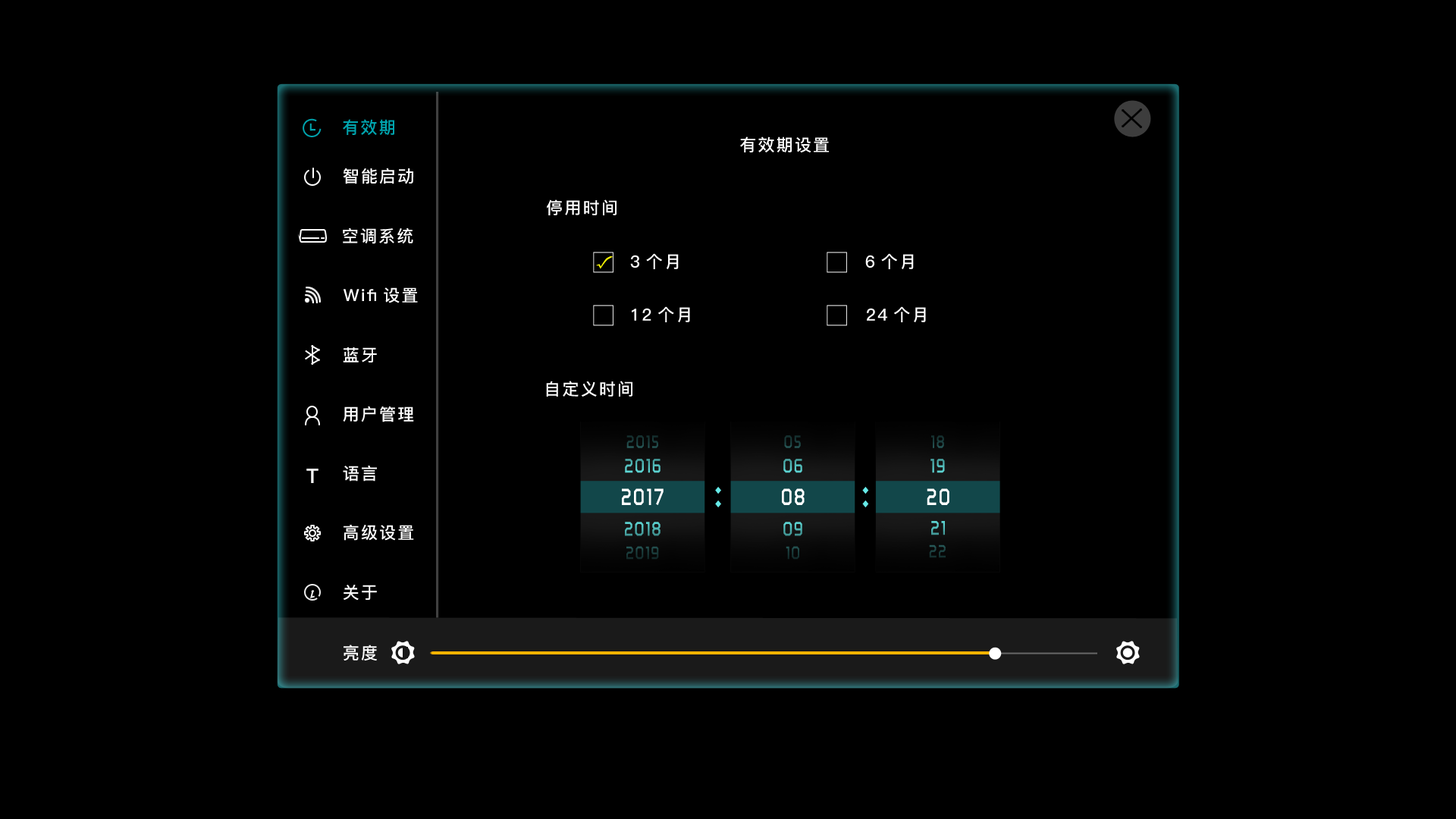
<style>
.page{position:relative;width:1456px;height:819px;background:#000000}
.page>*{position:absolute;margin:0}
.t1{font:16.7px "PingFang-SC-Bold";letter-spacing:0.1em;color:#00a5af}
.t2{font:16.7px "PingFang-SC-Bold";letter-spacing:0.1em;color:#ffffff}
.t3{font:18.4px "RTWSShangGoG0v1-Bold";letter-spacing:0.075em;color:#1a3d3c;scale:0.83 1}
.t4{font:18.4px "RTWSShangGoG0v1-Bold";letter-spacing:0.075em;color:#1b3d3d;scale:0.83 1}
.t5{font:20.3px "RTWSShangGoG0v1-Bold";letter-spacing:0.075em;scale:0.83 1}
.t6{font:19.8px "PingFang-SC-Heavy";letter-spacing:0.1em;color:#ffffff}
.t7{font:24px "RTWSShangGoG0v1-Bold";letter-spacing:0.075em;color:#ffffff;scale:0.83 1}
.t8{font:45.1px "RTWSShangGoG0v1-Bold";letter-spacing:0.075em;color:#66eae8;scale:0.83 1}
.t9{font:18.4px "RTWSShangGoG0v1-Bold";letter-spacing:0.075em;color:#1a3b3a;scale:0.83 1}
.t10{font:18.4px "RTWSShangGoG0v1-Bold";letter-spacing:0.075em;color:#1b3e3e;scale:0.83 1}
</style>
<div class="page">
<p class="t1" style="left:343px;top:119px;width:51px;height:16px">有效期</p>
<p class="t2" style="left:740px;top:136px;width:89px;height:16px">有效期设置</p>
<p class="t2" style="left:343px;top:168px;width:70px;height:16px">智能启动</p>
<p class="t2" style="left:547px;top:199px;width:70px;height:16px">停用时间</p>
<p class="t2" style="left:343px;top:227px;width:70px;height:17px">空调系统</p>
<p class="t2" style="left:630px;top:253px;width:49px;height:16px">3个月</p>
<p class="t2" style="left:865px;top:253px;width:49px;height:16px">6个月</p>
<p class="t2" style="left:344px;top:287px;width:74px;height:16px">Wifi设置</p>
<p class="t2" style="left:632px;top:306px;width:58px;height:16px">12个月</p>
<p class="t2" style="left:867px;top:306px;width:59px;height:16px">24个月</p>
<p class="t2" style="left:343px;top:347px;width:34px;height:15px">蓝牙</p>
<p class="t2" style="left:546px;top:381px;width:86px;height:16px">自定义时间</p>
<p class="t2" style="left:343px;top:406px;width:71px;height:16px">用户管理</p>
<p class="t3" style="left:626px;top:435px;width:32px;height:13px">2015</p>
<p class="t4" style="left:784px;top:435px;width:17px;height:13px">05</p>
<p class="t4" style="left:931px;top:435px;width:13px;height:13px">18</p>
<p class="t5" style="left:625px;top:459px;width:35px;height:14px">2016</p>
<p class="t5" style="left:783px;top:459px;width:19px;height:14px">06</p>
<p class="t5" style="left:930px;top:459px;width:15px;height:14px">19</p>
<p class="t6" style="left:306px;top:469px;width:12px;height:14px">T</p>
<p class="t2" style="left:343px;top:465px;width:34px;height:17px">语言</p>
<p class="t7" style="left:622px;top:488px;width:42px;height:17px">2017</p>
<p class="t8" style="left:715px;top:486px;width:6px;height:22px">:</p>
<p class="t7" style="left:782px;top:488px;width:23px;height:17px">08</p>
<p class="t8" style="left:862px;top:486px;width:7px;height:22px">:</p>
<p class="t7" style="left:927px;top:488px;width:22px;height:17px">20</p>
<p class="t5" style="left:625px;top:522px;width:35px;height:14px">2018</p>
<p class="t5" style="left:783px;top:522px;width:19px;height:14px">09</p>
<p class="t5" style="left:931px;top:521px;width:14px;height:14px">21</p>
<p class="t2" style="left:344px;top:524px;width:70px;height:17px">高级设置</p>
<p class="t9" style="left:626px;top:546px;width:33px;height:14px">2019</p>
<p class="t3" style="left:786px;top:546px;width:13px;height:14px">10</p>
<p class="t10" style="left:929px;top:544px;width:17px;height:14px">22</p>
<p class="t2" style="left:344px;top:585px;width:33px;height:16px">关于</p>
<p class="t2" style="left:344px;top:645px;width:33px;height:16px">亮度</p>
</div>
